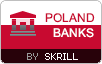
<style>
.page{position:relative;width:102px;height:64px;background:#c80a30}
.page>*{position:absolute;margin:0}
.t1{font:12px "ArialMT";color:#c80a30}
.t2{font:12px "ArialMT";color:#ffffff}
</style>
<div class="page">
<p class="t1" style="left:45px;top:13px;width:50px;height:10px">POLAND</p>
<p class="t2" style="left:53px;top:28px;width:41px;height:10px">BANKS</p>
</div>
